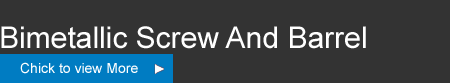
<style>
.page{position:relative;width:450px;height:83px;background:#333333}
.page>*{position:absolute;margin:0}
.t1{font:30px "ArialMT";color:#ffffff}
.t2{font:14px "ArialMT";color:#ffffff}
</style>
<div class="page">
<p class="t1" style="left:1px;top:26px;width:365px;height:23px">Bimetallic Screw And Barrel</p>
<p class="t2" style="left:20px;top:62px;width:118px;height:12px">Chick to view More</p>
</div>
